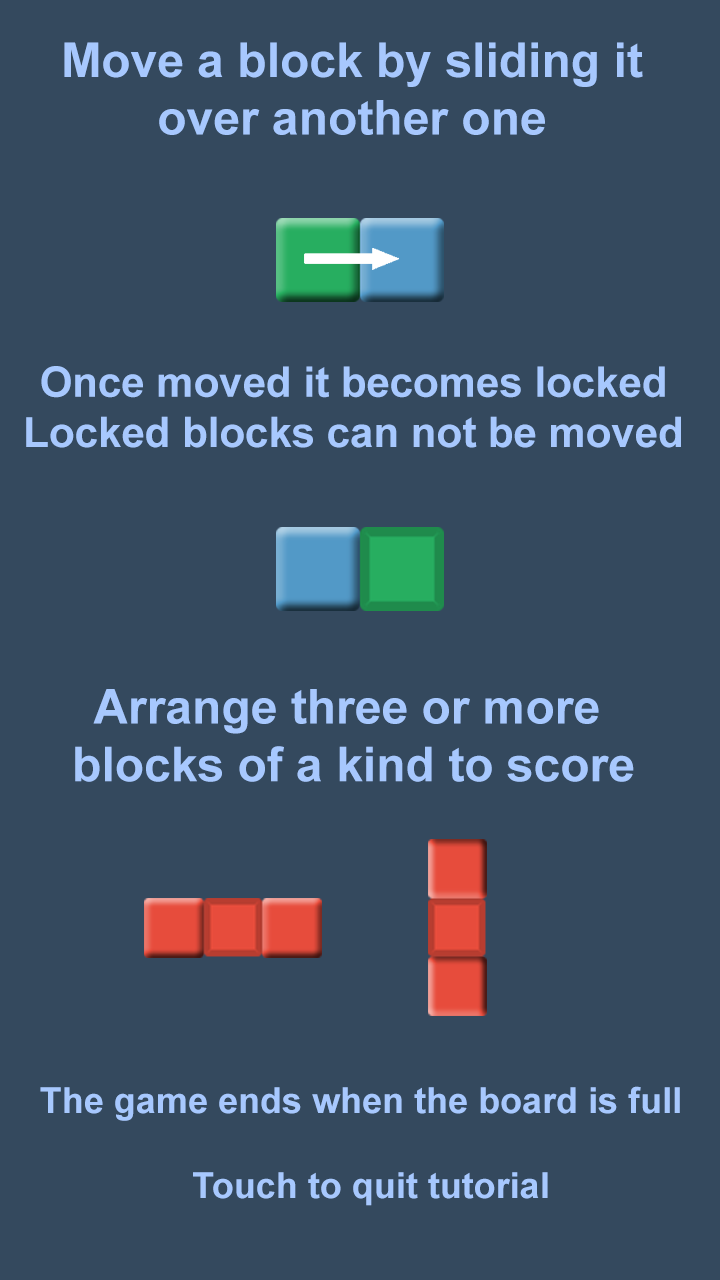
<style>
.page{position:relative;width:720px;height:1280px;background:#34495e}
.page>*{position:absolute;margin:0}
.t1{font:48px "Arial-BoldMT";color:#a7c8fe}
.t2{font:42px "Arial-BoldMT";color:#a7c8fe}
.t3{font:36px "Arial-BoldMT";color:#a7c8fe}
</style>
<div class="page">
<p class="t1" style="left:64px;top:42px;width:579px;height:93px;text-align:center">Move a block by sliding it<br>over another one</p>
<p class="t2" style="left:26px;top:366px;width:655px;height:82px;text-align:center">Once moved it becomes locked<br>Locked blocks can not be moved</p>
<p class="t1" style="left:75px;top:689px;width:559px;height:93px;text-align:center">Arrange three or more <br>blocks of a kind to score</p>
<p class="t3" style="left:40px;top:1086px;width:640px;height:35px">The game ends when the board is full</p>
<p class="t3" style="left:193px;top:1172px;width:355px;height:34px">Touch to quit tutorial</p>
</div>
